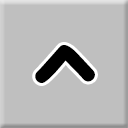
<style>
.page{position:relative;width:128px;height:128px;background:#bfbfbf}
.page>*{position:absolute;margin:0}
.t1{font:148px "ComicSansMS";color:#000000}
</style>
<div class="page">
<p class="t1" style="left:35px;top:45px;width:60px;height:38px">^</p>
</div>
